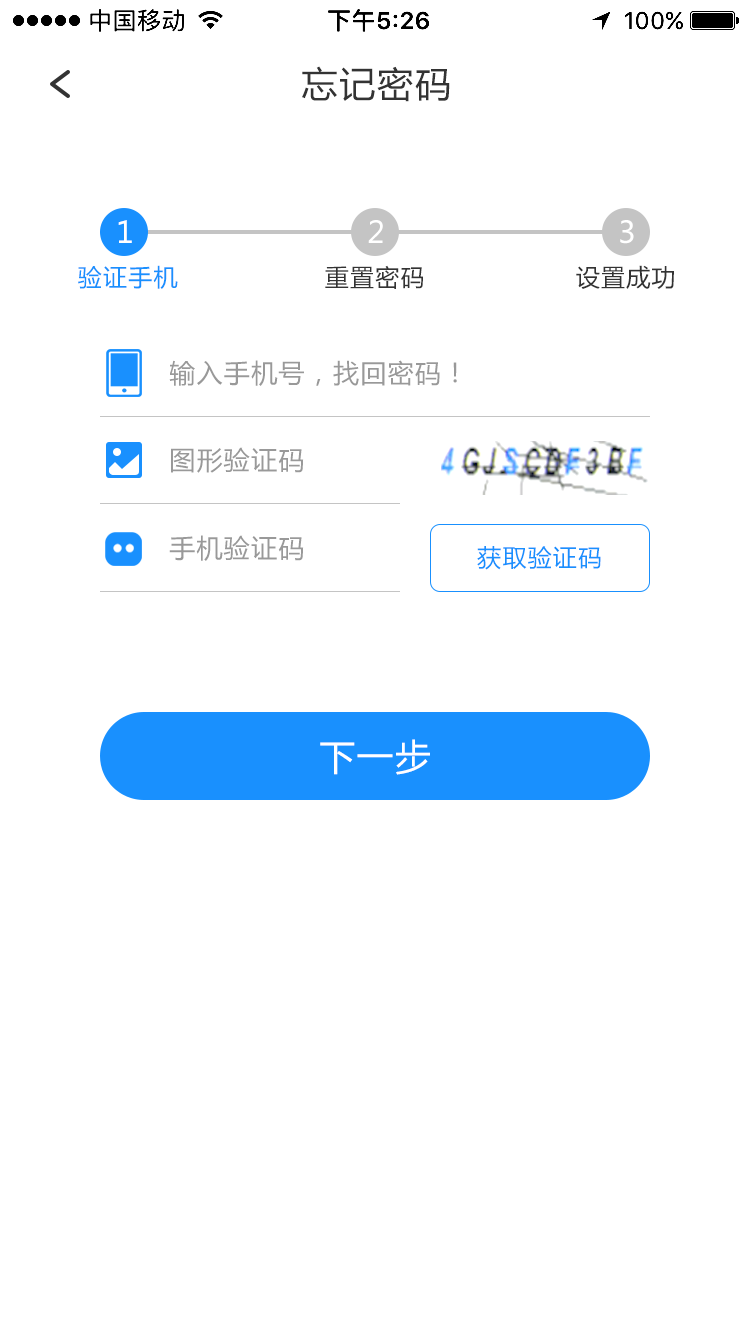
<style>
.page{position:relative;width:750px;height:1334px;background:#ffffff}
.page>*{position:absolute;margin:0}
.t1{font:36px "MicrosoftYaHei";letter-spacing:0.05em;color:#333333}
.t2{font:30px "MicrosoftYaHei";letter-spacing:0.05em;color:#ffffff}
.t3{font:24px "MicrosoftYaHei";letter-spacing:0.05em;color:#1990fe}
.t4{font:24px "MicrosoftYaHei";letter-spacing:0.05em;color:#333333}
.t5{font:26px "MicrosoftYaHei";letter-spacing:0.05em;color:#999999}
.t6{font:36px "MicrosoftYaHei";letter-spacing:0.05em;color:#ffffff}
</style>
<div class="page">
<p class="t1" style="left:302px;top:66px;width:148px;height:36px">忘记密码</p>
<p class="t2" style="left:118px;top:220px;width:14px;height:23px">1</p>
<p class="t2" style="left:368px;top:220px;width:15px;height:23px">2</p>
<p class="t2" style="left:620px;top:220px;width:14px;height:24px">3</p>
<p class="t3" style="left:78px;top:265px;width:100px;height:24px">验证手机</p>
<p class="t4" style="left:325px;top:265px;width:98px;height:24px">重置密码</p>
<p class="t4" style="left:576px;top:265px;width:98px;height:24px">设置成功</p>
<p class="t5" style="left:169px;top:360px;width:288px;height:26px">输入手机号，找回密码！</p>
<p class="t5" style="left:171px;top:447px;width:133px;height:26px">图形验证码</p>
<p class="t5" style="left:169px;top:535px;width:135px;height:26px">手机验证码</p>
<p class="t3" style="left:477px;top:546px;width:124px;height:24px">获取验证码</p>
<p class="t6" style="left:320px;top:739px;width:110px;height:36px">下一步</p>
</div>
